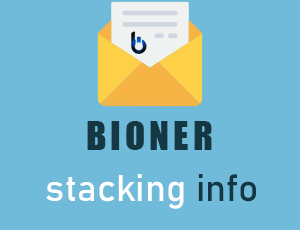
<style>
.page{position:relative;width:300px;height:230px;background:#70bbd9}
.page>*{position:absolute;margin:0}
.t1{font:37.4px "Impact";letter-spacing:0.1em;color:#153643}
.t2{font:37.4px "Bahnschrift";color:#ffffff}
.t3{font:37.4px "Bahnschrift";color:#153643}
</style>
<div class="page">
<p class="t1" style="left:87px;top:121px;width:125px;height:29px">BIONER</p>
<p class="t2" style="left:46px;top:174px;width:210px;height:35px">stacking <span class="t3">info</span></p>
</div>
